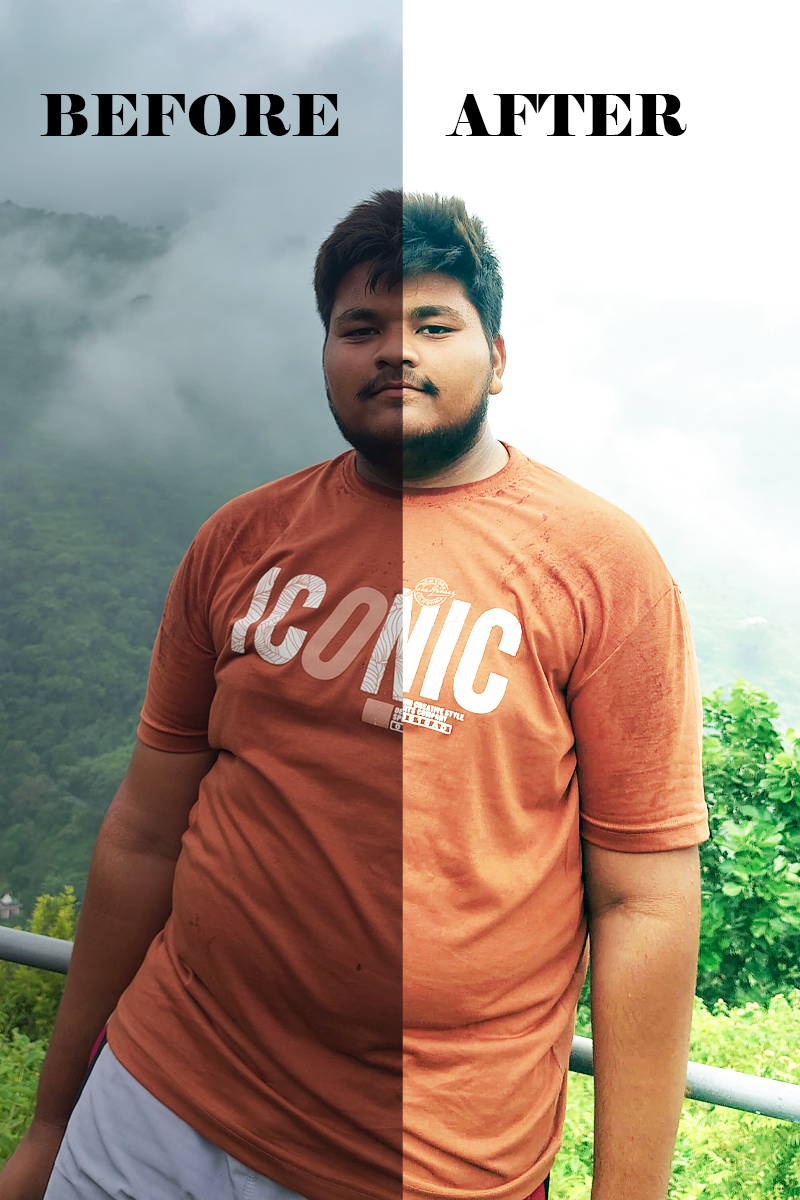
<style>
.page{position:relative;width:800px;height:1200px}
.page>*{position:absolute;margin:0}
.t1{font:57.8px "Elephant-Regular";color:#000000}
</style>
<div class="page">
<p class="t1" style="left:40px;top:94px;width:299px;height:42px">BEFORE</p>
<p class="t1" style="left:445px;top:94px;width:242px;height:42px">AFTER</p>
</div>
